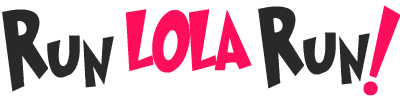
<style>
.page{position:relative;width:400px;height:100px;background:#ffffff}
.page>*{position:absolute;margin:0}
.t1{font:92.6px "Grinched";color:#292929;scale:0.97 1}
.t2{font:92.6px "Grinched";color:#ff0e5b;scale:0.97 1}
.t3{font:73.5px "Grinched";color:#ff0e5b;scale:0.97 1}
</style>
<div class="page">
<p class="t1" style="left:258px;top:6px;width:112px;height:83px">Run</p>
<p class="t2" style="left:363px;top:5px;width:38px;height:91px">!</p>
<p class="t1" style="left:2px;top:9px;width:112px;height:83px">Run</p>
<p class="t3" style="left:125px;top:9px;width:127px;height:64px">LOLA</p>
</div>
